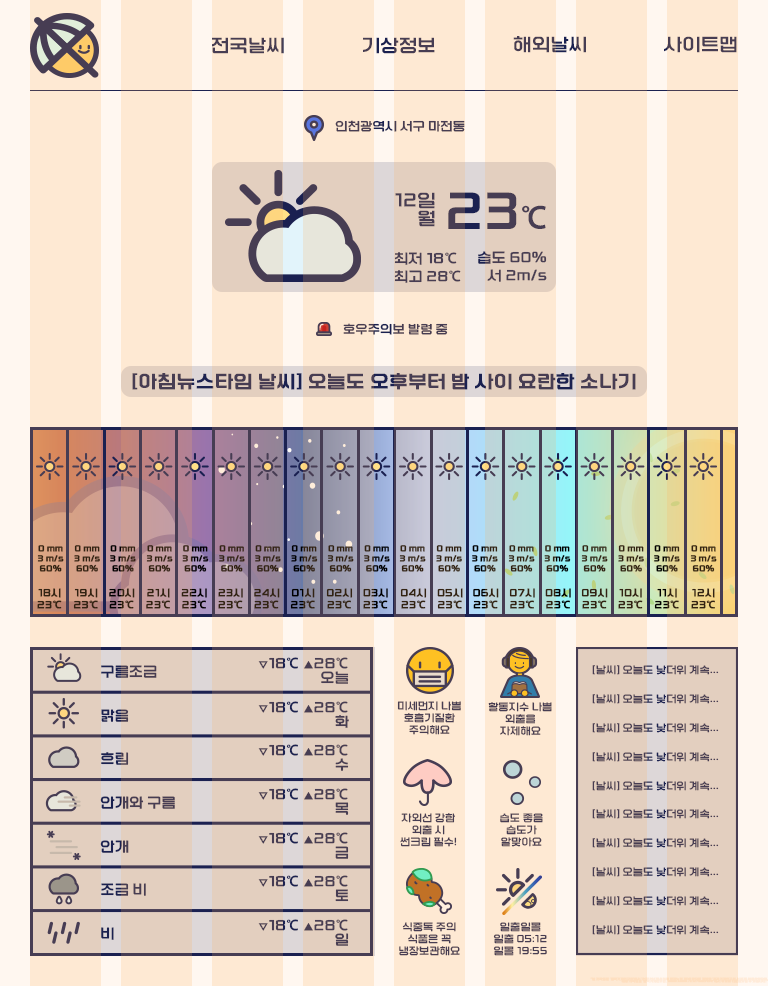
<style>
.page{position:relative;width:768px;height:986px;background:#fee9d3}
.page>*{position:absolute;margin:0}
.t1{font:18px "KIMM_Bold";color:#473d53}
.t2{font:12px "KIMM_Bold";color:#473d53}
.t3{font:18px/18px "KIMM_Bold";color:#473d53}
.t4{font:50px "KIMM_Bold";color:#473d53}
.t5{font:30px "KIMM_Bold";color:#473d53}
.t6{font:14px/18px "KIMM_Bold";color:#473d53}
.t7{font:18px "KIMM_Bold";color:#473d53;font-weight:bold}
.t8{font:8px/10px "KIMM_Bold";color:#322313;font-weight:bold}
.t9{font:8px/10px "KIMM_Bold";font-weight:bold}
.t10{font:8px/10px "KIMM_Bold";color:#000000;font-weight:bold}
.t11{font:10px/12px "KIMM_Bold";color:#322313;font-weight:bold}
.t12{font:10px/12px "KIMM_Bold";font-weight:bold}
.t13{font:14px "KIMM_Bold"}
.t14{font:14px/14px "KIMM_Bold";color:#473d53}
.t15{font:10px/14px "KIMM_Bold";color:#473d53}
.t16{font:10px "KIMM_Bold";color:#473d53}
.t17{font:10px/12px "KIMM_Bold";color:#473d53}
.t18{font:14px "KIMM_Bold";color:#1a2151}
.t19{font:14px "KIMM_Bold";color:#473d53}
.t20{font:3px/2px "KIMM_Bold";color:#fedfc0;font-weight:bold}
</style>
<div class="page">
<p class="t1" style="left:212px;top:37px;width:72px;height:17px">전국날씨</p>
<p class="t1" style="left:363px;top:37px;width:72px;height:17px">기상정보</p>
<p class="t1" style="left:513px;top:36px;width:73px;height:17px">해외날씨</p>
<p class="t1" style="left:664px;top:36px;width:73px;height:17px">사이트맵</p>
<p class="t2" style="left:335px;top:120px;width:130px;height:12px">인천광역시 서구 마전동</p>
<p class="t3" style="left:395px;top:192px;width:40px;height:35px;text-align:right">12일<br>월</p>
<p class="t4" style="left:448px;top:192px;width:98px;height:37px">23<span class="t5">℃</span></p>
<p class="t6" style="left:394px;top:252px;width:67px;height:31px">최저 18℃<br>최고 28℃</p>
<p class="t6" style="left:478px;top:251px;width:69px;height:31px;text-align:right">습도 60%<br>서 2m/s</p>
<p class="t2" style="left:343px;top:323px;width:105px;height:12px">호우주의보 발령 중</p>
<p class="t7" style="left:132px;top:373px;width:504px;height:17px">[아침뉴스타임 날씨] 오늘도 오후부터 밤 사이 요란한 소나기</p>
<p class="t8" style="left:37px;top:545px;width:27px;height:27px;text-align:center">0 mm<br>3 m/s<br>60%</p>
<p class="t8" style="left:74px;top:545px;width:26px;height:27px;text-align:center">0 mm<br>3 m/s<br>60%</p>
<p class="t9" style="left:110px;top:545px;width:26px;height:27px;text-align:center">0 mm<br>3 m/s<br>60%</p>
<p class="t8" style="left:146px;top:545px;width:27px;height:27px;text-align:center">0 mm<br>3 m/s<br>60%</p>
<p class="t10" style="left:182px;top:545px;width:27px;height:27px;text-align:center">0 mm<br>3 m/s<br>60%</p>
<p class="t8" style="left:219px;top:545px;width:26px;height:27px;text-align:center">0 mm<br>3 m/s<br>60%</p>
<p class="t8" style="left:255px;top:545px;width:26px;height:27px;text-align:center">0 mm<br>3 m/s<br>60%</p>
<p class="t9" style="left:291px;top:545px;width:27px;height:27px;text-align:center">0 mm<br>3 m/s<br>60%</p>
<p class="t8" style="left:327px;top:545px;width:27px;height:27px;text-align:center">0 mm<br>3 m/s<br>60%</p>
<p class="t9" style="left:364px;top:545px;width:26px;height:27px;text-align:center">0 mm<br>3 m/s<br>60%</p>
<p class="t8" style="left:399px;top:545px;width:27px;height:27px;text-align:center">0 mm<br>3 m/s<br>60%</p>
<p class="t8" style="left:436px;top:545px;width:26px;height:27px;text-align:center">0 mm<br>3 m/s<br>60%</p>
<p class="t9" style="left:472px;top:545px;width:26px;height:27px;text-align:center">0 mm<br>3 m/s<br>60%</p>
<p class="t8" style="left:508px;top:545px;width:27px;height:27px;text-align:center">0 mm<br>3 m/s<br>60%</p>
<p class="t9" style="left:544px;top:545px;width:27px;height:27px;text-align:center">0 mm<br>3 m/s<br>60%</p>
<p class="t8" style="left:581px;top:545px;width:27px;height:27px;text-align:center">0 mm<br>3 m/s<br>60%</p>
<p class="t8" style="left:618px;top:545px;width:26px;height:27px;text-align:center">0 mm<br>3 m/s<br>60%</p>
<p class="t9" style="left:654px;top:545px;width:26px;height:27px;text-align:center">0 mm<br>3 m/s<br>60%</p>
<p class="t8" style="left:690px;top:545px;width:27px;height:27px;text-align:center">0 mm<br>3 m/s<br>60%</p>
<p class="t11" style="left:37px;top:588px;width:25px;height:21px;text-align:center">18시<br>23℃</p>
<p class="t11" style="left:73px;top:588px;width:25px;height:21px;text-align:center">19시<br>23℃</p>
<p class="t12" style="left:109px;top:588px;width:26px;height:21px;text-align:center">20시<br>23℃</p>
<p class="t11" style="left:146px;top:588px;width:24px;height:21px;text-align:center">21시<br>23℃</p>
<p class="t12" style="left:181px;top:588px;width:26px;height:21px;text-align:center">22시<br>23℃</p>
<p class="t11" style="left:218px;top:588px;width:25px;height:21px;text-align:center">23시<br>23℃</p>
<p class="t11" style="left:254px;top:588px;width:26px;height:21px;text-align:center">24시<br>23℃</p>
<p class="t12" style="left:290px;top:588px;width:25px;height:21px;text-align:center">01시<br>23℃</p>
<p class="t11" style="left:326px;top:588px;width:27px;height:21px;text-align:center">02시<br>23℃</p>
<p class="t12" style="left:363px;top:588px;width:25px;height:21px;text-align:center">03시<br>23℃</p>
<p class="t11" style="left:400px;top:588px;width:27px;height:21px;text-align:center">04시<br>23℃</p>
<p class="t11" style="left:437px;top:588px;width:26px;height:21px;text-align:center">05시<br>23℃</p>
<p class="t12" style="left:473px;top:588px;width:26px;height:21px;text-align:center">06시<br>23℃</p>
<p class="t11" style="left:509px;top:588px;width:26px;height:21px;text-align:center">07시<br>23℃</p>
<p class="t12" style="left:545px;top:588px;width:26px;height:21px;text-align:center">08시<br>23℃</p>
<p class="t11" style="left:581px;top:588px;width:27px;height:21px;text-align:center">09시<br>23℃</p>
<p class="t11" style="left:618px;top:588px;width:25px;height:21px;text-align:center">10시<br>23℃</p>
<p class="t12" style="left:654px;top:588px;width:25px;height:21px;text-align:center">11시<br>23℃</p>
<p class="t11" style="left:691px;top:588px;width:24px;height:21px;text-align:center">12시<br>23℃</p>
<p class="t13" style="left:101px;top:665px;width:56px;height:13px">구름조금</p>
<p class="t14" style="left:258px;top:657px;width:91px;height:27px;text-align:right"><span class="t15">▽</span>18℃ <span class="t15">▲</span>28℃<br>오늘</p>
<p class="t16" style="left:592px;top:665px;width:127px;height:10px">[날씨] 오늘도 낮더위 계속...</p>
<p class="t14" style="left:258px;top:701px;width:91px;height:27px;text-align:right"><span class="t15">▽</span>18℃ <span class="t15">▲</span>28℃<br>화</p>
<p class="t17" style="left:397px;top:701px;width:64px;height:34px;text-align:center">미세먼지 나쁨<br>호흡기질환<br>주의해요</p>
<p class="t17" style="left:488px;top:702px;width:64px;height:34px;text-align:center">활동지수 나쁨<br>외출을<br>자제해요</p>
<p class="t16" style="left:592px;top:694px;width:127px;height:10px">[날씨] 오늘도 낮더위 계속...</p>
<p class="t18" style="left:101px;top:709px;width:28px;height:13px">맑음</p>
<p class="t16" style="left:592px;top:723px;width:127px;height:10px">[날씨] 오늘도 낮더위 계속...</p>
<p class="t14" style="left:258px;top:744px;width:91px;height:27px;text-align:right"><span class="t15">▽</span>18℃ <span class="t15">▲</span>28℃<br>수</p>
<p class="t18" style="left:101px;top:752px;width:28px;height:13px">흐림</p>
<p class="t16" style="left:592px;top:752px;width:127px;height:10px">[날씨] 오늘도 낮더위 계속...</p>
<p class="t16" style="left:592px;top:781px;width:127px;height:10px">[날씨] 오늘도 낮더위 계속...</p>
<p class="t19" style="left:100px;top:796px;width:75px;height:13px">안개와 구름</p>
<p class="t14" style="left:258px;top:788px;width:91px;height:27px;text-align:right"><span class="t15">▽</span>18℃ <span class="t15">▲</span>28℃<br>목</p>
<p class="t16" style="left:592px;top:809px;width:127px;height:10px">[날씨] 오늘도 낮더위 계속...</p>
<p class="t17" style="left:400px;top:813px;width:57px;height:34px;text-align:center">자외선 강함<br>외출 시<br>썬크림 필수!</p>
<p class="t17" style="left:500px;top:813px;width:43px;height:34px;text-align:center">습도 좋음<br>습도가<br>알맞아요</p>
<p class="t14" style="left:258px;top:832px;width:91px;height:27px;text-align:right"><span class="t15">▽</span>18℃ <span class="t15">▲</span>28℃<br>금</p>
<p class="t18" style="left:100px;top:840px;width:29px;height:13px">안개</p>
<p class="t16" style="left:592px;top:838px;width:127px;height:10px">[날씨] 오늘도 낮더위 계속...</p>
<p class="t16" style="left:592px;top:867px;width:127px;height:10px">[날씨] 오늘도 낮더위 계속...</p>
<p class="t14" style="left:258px;top:875px;width:91px;height:27px;text-align:right"><span class="t15">▽</span>18℃ <span class="t15">▲</span>28℃<br>토</p>
<p class="t13" style="left:101px;top:883px;width:45px;height:13px">조금 비</p>
<p class="t16" style="left:592px;top:896px;width:127px;height:10px">[날씨] 오늘도 낮더위 계속...</p>
<p class="t18" style="left:101px;top:927px;width:13px;height:13px">비</p>
<p class="t14" style="left:258px;top:919px;width:91px;height:27px;text-align:right"><span class="t15">▽</span>18℃ <span class="t15">▲</span>28℃<br>일</p>
<p class="t17" style="left:399px;top:922px;width:61px;height:34px;text-align:center">식중독 주의<br>식품은 꼭<br>냉장보관해요</p>
<p class="t17" style="left:493px;top:922px;width:54px;height:34px;text-align:center">일출일몰<br>일출 05:12<br>일몰 19:55</p>
<p class="t16" style="left:592px;top:925px;width:127px;height:10px">[날씨] 오늘도 낮더위 계속...</p>
<p class="t20" style="left:590px;top:977px;width:179px;height:6px;text-align:right">"본 저작물은 '한국기계연구원'에서 '2022년'작성하여 공공누리 제1유형으로 개방한 '한국기계연구원 서체'를 이용하였으며,<br>해당 저작물은 '한국기계연구원, www.kimm.re.kr/webfont'에서 무료로 다운받으실 수 있습니다."</p>
</div>
